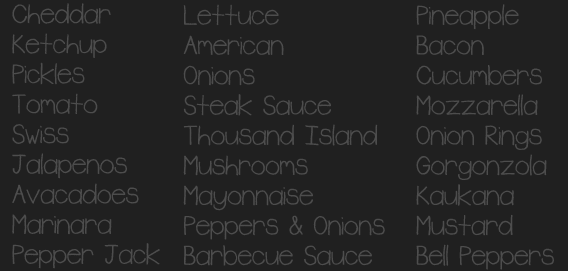
<style>
.page{position:relative;width:568px;height:271px;background:#202020}
.page>*{position:absolute;margin:0}
.t1{font:32.5px/30px "Rudiment";color:#4d4d4d}
</style>
<div class="page">
<p class="t1" style="left:12px;top:3px;width:148px;height:266px">Cheddar<br>Ketchup<br>Pickles<br>Tomato<br>Swiss<br>Jalapenos<br>Avacadoes<br>Marinara<br>Pepper Jack</p>
<p class="t1" style="left:183px;top:4px;width:202px;height:262px">Lettuce<br>American<br>Onions<br>Steak Sauce<br>Thousand Island<br>Mushrooms<br>Mayonnaise<br>Peppers &amp; Onions<br>Barbecue Sauce</p>
<p class="t1" style="left:416px;top:4px;width:138px;height:266px">Pineapple<br>Bacon<br>Cucumbers<br>Mozzarella<br>Onion Rings<br>Gorgonzola<br>Kaukana<br>Mustard<br>Bell Peppers</p>
</div>
